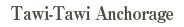
<style>
.page{position:relative;width:184px;height:27px;background:#ffffff}
.page>*{position:absolute;margin:0}
.t1{font:18px "RyuminPro-ExBold";letter-spacing:-0.04em;color:#4c4843;scale:0.9 1}
</style>
<div class="page">
<p class="t1" style="left:10px;top:6px;width:164px;height:17px">Tawi-Tawi Anchorage</p>
</div>
